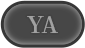
<style>
.page{position:relative;width:85px;height:48px;background:#474747}
.page>*{position:absolute;margin:0}
.t1{font:22px "RyuminPro-ExBold";letter-spacing:-0.08em;color:#a1a1a1}
</style>
<div class="page">
<p class="t1" style="left:27px;top:16px;width:31px;height:17px">YA</p>
</div>
